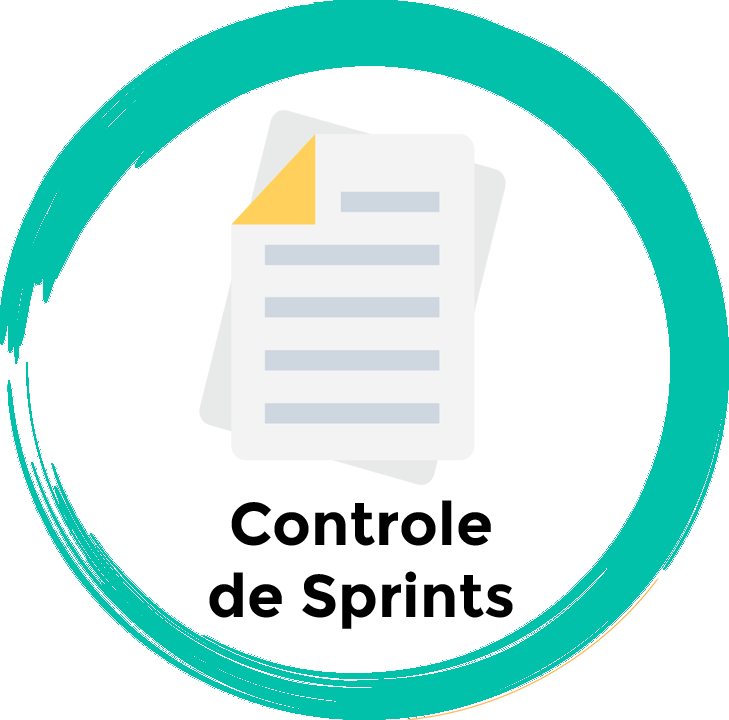
<style>
.page{position:relative;width:729px;height:720px;background:#ffffff}
.page>*{position:absolute;margin:0}
.t1{font:60px "Montserrat-Bold";color:#000000}
</style>
<div class="page">
<p class="t1" style="left:209px;top:500px;width:304px;height:129px;text-align:center">Controle<br>de Sprints</p>
</div>
